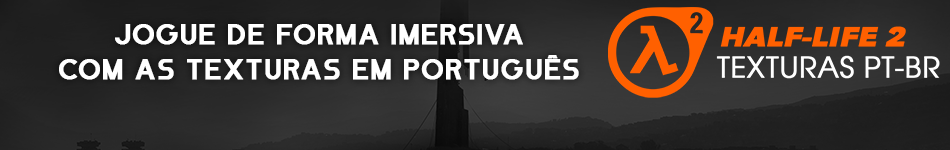
<style>
.page{position:relative;width:950px;height:150px}
.page>*{position:absolute;margin:0}
.t1{font:29.4px/35.2px "IncompleetaRegularReveal";letter-spacing:0.01em;color:#ffffff;font-weight:bold}
</style>
<div class="page">
<p class="t1" style="left:59px;top:24px;width:520px;height:56px;text-align:center">jogue de forma imersiva<br>com as texturas em português</p>
</div>
